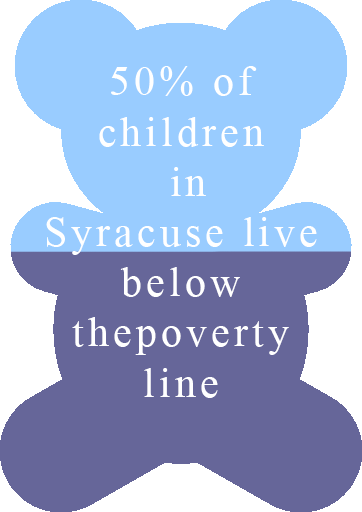
<style>
.page{position:relative;width:362px;height:512px;background:#666699}
.page>*{position:absolute;margin:0}
.t1{font:41.8px "TimesNewRomanPSMT";letter-spacing:0.1em;color:#ffffff}
</style>
<div class="page">
<p class="t1" style="left:46px;top:66px;width:271px;height:332px;text-align:center">50% of children<br> in <br>Syracuse live below thepoverty line</p>
</div>
